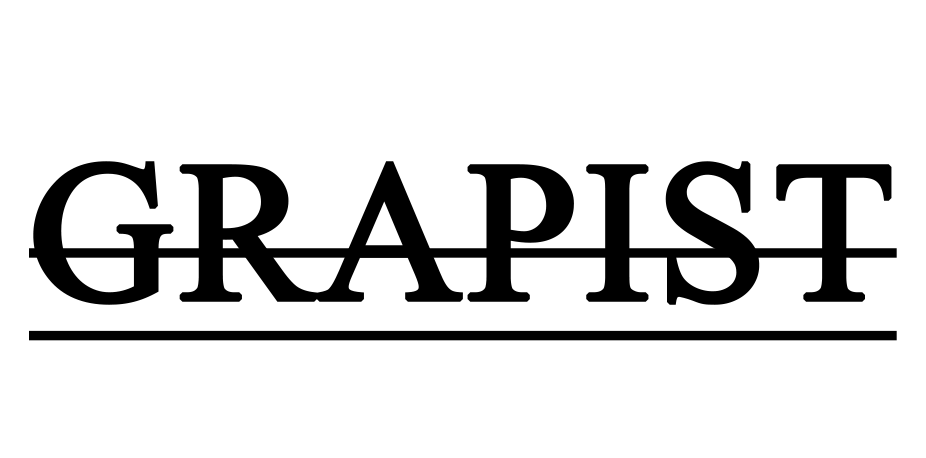
<style>
.page{position:relative;width:926px;height:458px;background:#ffffff}
.page>*{position:absolute;margin:0}
.t1{font:200px "MongolianBaiti";color:#000000;font-weight:bold;text-decoration:underline}
</style>
<div class="page">
<p class="t1" style="left:29px;top:161px;width:868px;height:180px">GRAPIST</p>
</div>
